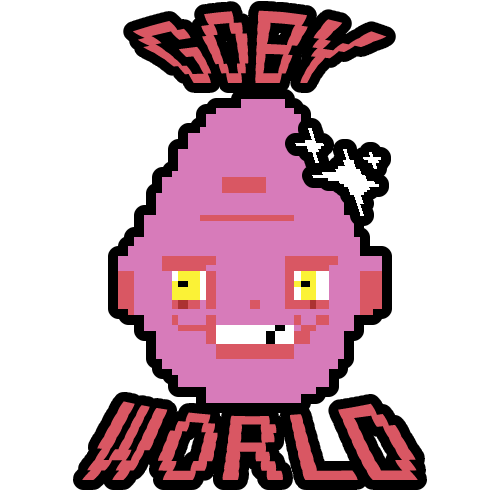
<style>
.page{position:relative;width:500px;height:500px;background:#ffffff}
.page>*{position:absolute;margin:0}
.t1{font:114.2px "VT323-Regular";color:#d95763}
</style>
<div class="page">
<p class="t1" style="left:133px;top:10px;width:254px;height:73px">GOBY</p>
<p class="t1" style="left:82px;top:401px;width:336px;height:79px">WORLD</p>
</div>
